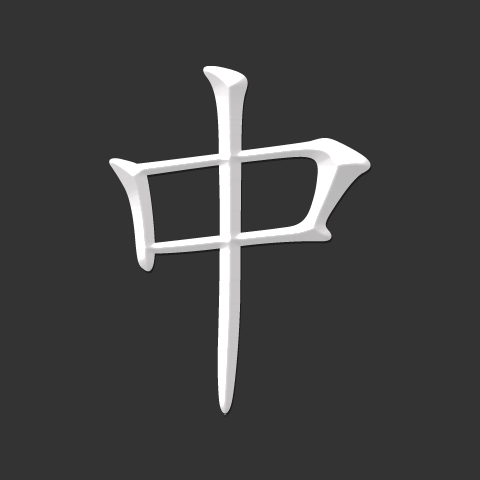
<style>
.page{position:relative;width:480px;height:480px;background:#333333}
.page>*{position:absolute;margin:0}
.t1{font:376.3px "AdobeKaitiStd-Regular"}
</style>
<div class="page">
<p class="t1" style="left:109px;top:66px;width:262px;height:349px">中</p>
</div>
